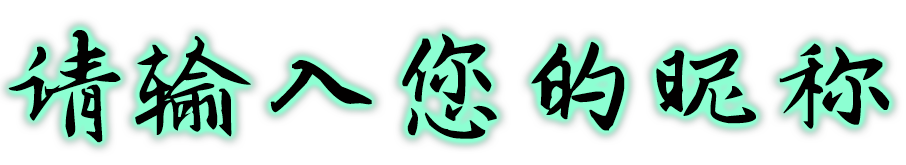
<style>
.page{position:relative;width:906px;height:165px;background:#ffffff}
.page>*{position:absolute;margin:0}
.t1{font:119.4px "SentyZHAO";color:#020000}
</style>
<div class="page">
<p class="t1" style="left:8px;top:30px;width:882px;height:113px">请输入您的昵称</p>
</div>
